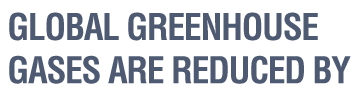
<style>
.page{position:relative;width:360px;height:102px;background:#ffffff}
.page>*{position:absolute;margin:0}
.t1{font:36px "Helvetica-Condensed-Bold";letter-spacing:-0.04em;color:#4e5972;text-transform:uppercase}
</style>
<div class="page">
<p class="t1" style="left:9px;top:12px;width:342px;height:72px">GLOBAL GREENHOUSe<br>gases are reduced by</p>
</div>
